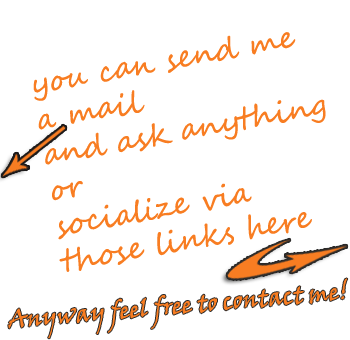
<style>
.page{position:relative;width:350px;height:340px;background:#ffffff}
.page>*{position:absolute;margin:0}
.t1{font:30px "SegoeScript";color:#f87d22}
.t2{font:24px "VinerHandITC";color:#f87d22;scale:0.96 1}
</style>
<div class="page">
<p class="t1" style="left:33px;top:32px;width:293px;height:240px;rotate:-10deg">you can send me <br>a mail <br>and ask anything<br>or<br>socialize via <br>those links here</p>
<p class="t2" style="left:8px;top:278px;width:340px;height:61px;rotate:-5deg">Anyway feel free to contact me!</p>
</div>
